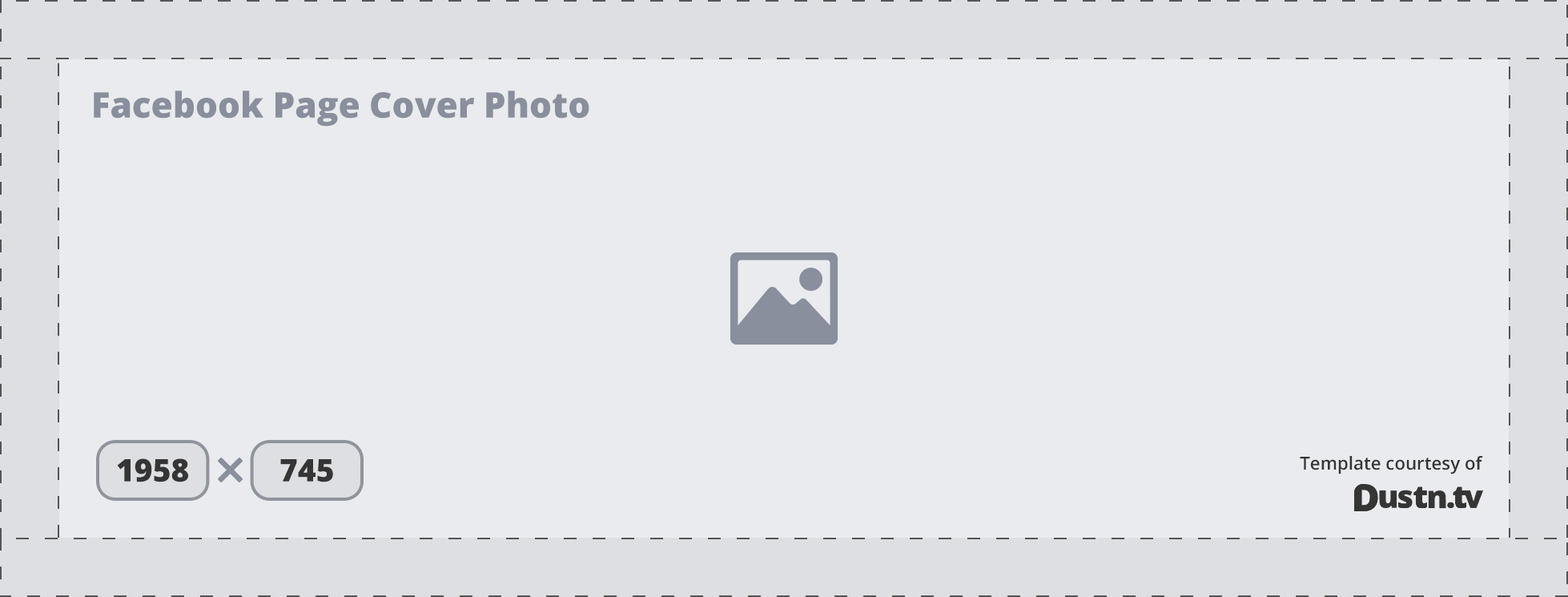
<style>
.page{position:relative;width:1568px;height:597px;background:#e9ebee}
.page>*{position:absolute;margin:0}
.t1{font:35.2px "OpenSans-Extrabold";color:#898f9c}
.t2{font:31.2px "OpenSans-Extrabold";color:#353535}
.t3{font:17.8px "OpenSans-Semibold";color:#353535}
</style>
<div class="page">
<p class="t1" style="left:94px;top:90px;width:495px;height:37px">Facebook Page Cover Photo</p>
<p class="t2" style="left:117px;top:458px;width:71px;height:24px">1958</p>
<p class="t2" style="left:280px;top:459px;width:53px;height:23px">745</p>
<p class="t3" style="left:1300px;top:456px;width:183px;height:18px">Template courtesy of</p>
</div>
